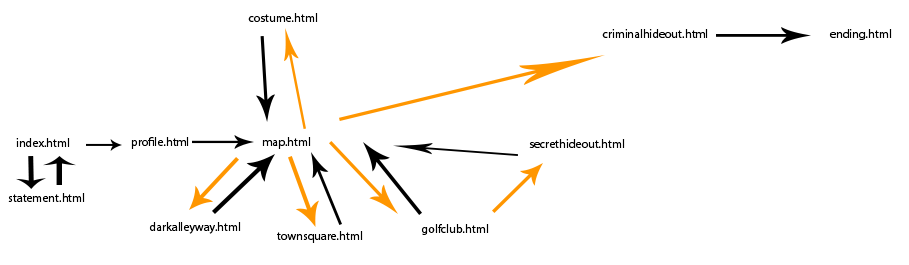
<style>
.page{position:relative;width:909px;height:265px;background:#ffffff}
.page>*{position:absolute;margin:0}
.t1{font:12px "MyriadHebrew-Regular";color:#000000}
</style>
<div class="page">
<p class="t1" style="left:248px;top:13px;width:70px;height:9px">costume.html</p>
<p class="t1" style="left:602px;top:29px;width:106px;height:9px">criminalhideout.html</p>
<p class="t1" style="left:829px;top:29px;width:63px;height:11px">ending.html</p>
<p class="t1" style="left:131px;top:137px;width:58px;height:12px">profile.html</p>
<p class="t1" style="left:262px;top:137px;width:49px;height:12px">map.html</p>
<p class="t1" style="left:16px;top:138px;width:54px;height:9px">index.html</p>
<p class="t1" style="left:529px;top:139px;width:96px;height:9px">secrethideout.html</p>
<p class="t1" style="left:8px;top:193px;width:77px;height:9px">statement.html</p>
<p class="t1" style="left:149px;top:222px;width:92px;height:12px">darkalleyway.html</p>
<p class="t1" style="left:277px;top:231px;width:86px;height:12px">townsquare.html</p>
<p class="t1" style="left:421px;top:224px;width:68px;height:11px">golfclub.html</p>
</div>
